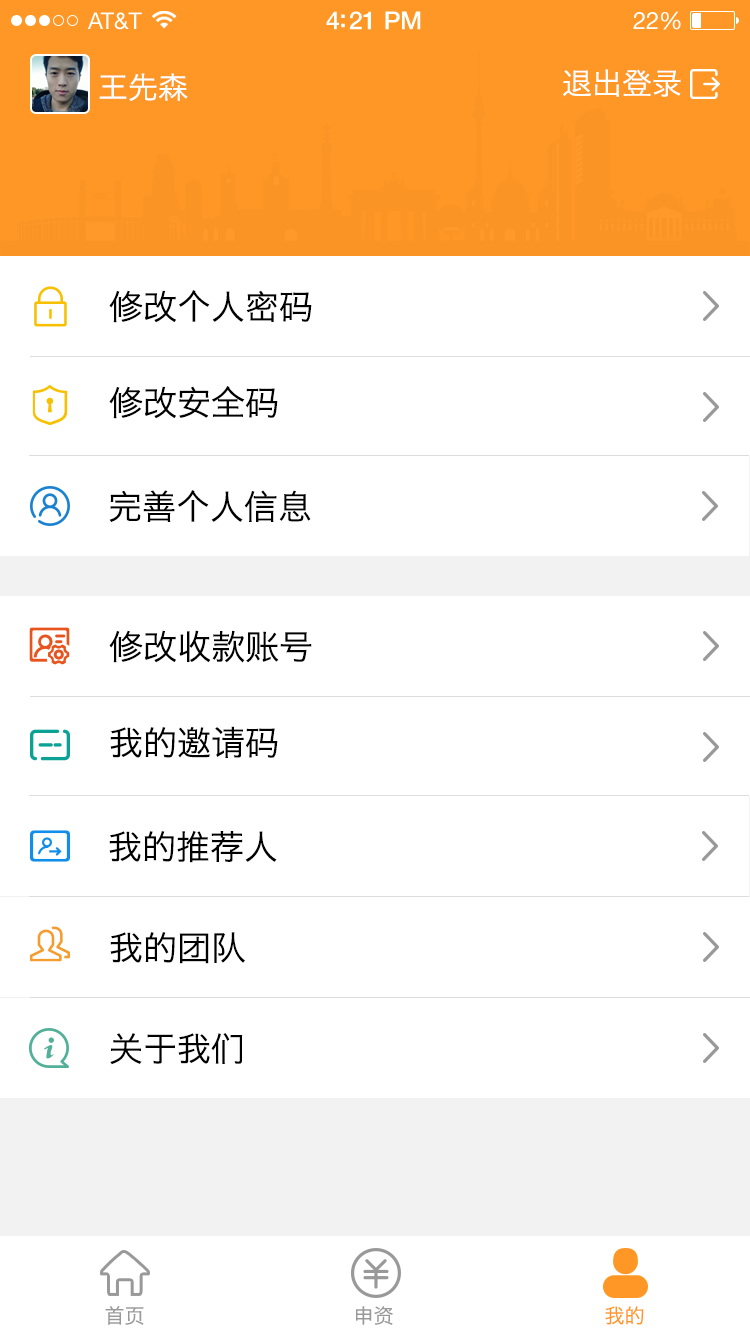
<style>
.page{position:relative;width:750px;height:1334px;background:#ffffff}
.page>*{position:absolute;margin:0}
.t1{font:30px "HiraginoSansGB-W3";color:#ffffff}
.t2{font:34px "HiraginoSansGB-W3";color:#000000}
.t3{font:20.3px "HiraginoSansGB-W3";color:#999999}
.t4{font:20.3px "HiraginoSansGB-W3";color:#ff9726}
</style>
<div class="page">
<p class="t1" style="left:99px;top:73px;width:89px;height:28px">王先森</p>
<p class="t1" style="left:563px;top:69px;width:118px;height:28px">退出登录</p>
<p class="t2" style="left:109px;top:290px;width:203px;height:33px">修改个人密码</p>
<p class="t2" style="left:109px;top:386px;width:169px;height:33px">修改安全码</p>
<p class="t2" style="left:109px;top:490px;width:202px;height:32px">完善个人信息</p>
<p class="t2" style="left:109px;top:630px;width:203px;height:33px">修改收款账号</p>
<p class="t2" style="left:110px;top:726px;width:168px;height:32px">我的邀请码</p>
<p class="t2" style="left:109px;top:831px;width:168px;height:32px">我的推荐人</p>
<p class="t2" style="left:110px;top:932px;width:135px;height:32px">我的团队</p>
<p class="t2" style="left:110px;top:1033px;width:133px;height:32px">关于我们</p>
<p class="t3" style="left:105px;top:1306px;width:39px;height:19px">首页</p>
<p class="t3" style="left:356px;top:1306px;width:37px;height:19px">申资</p>
<p class="t4" style="left:605px;top:1306px;width:39px;height:19px">我的</p>
</div>
